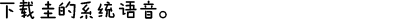
<style>
.page{position:relative;width:407px;height:19px;background:#ffffff}
.page>*{position:absolute;margin:0}
.t1{font:22px "¢è?";color:#000000}
</style>
<div class="page">
<p class="t1" style="left:0px;top:0px;width:167px;height:20px">下载圭的系统语音。</p>
</div>
